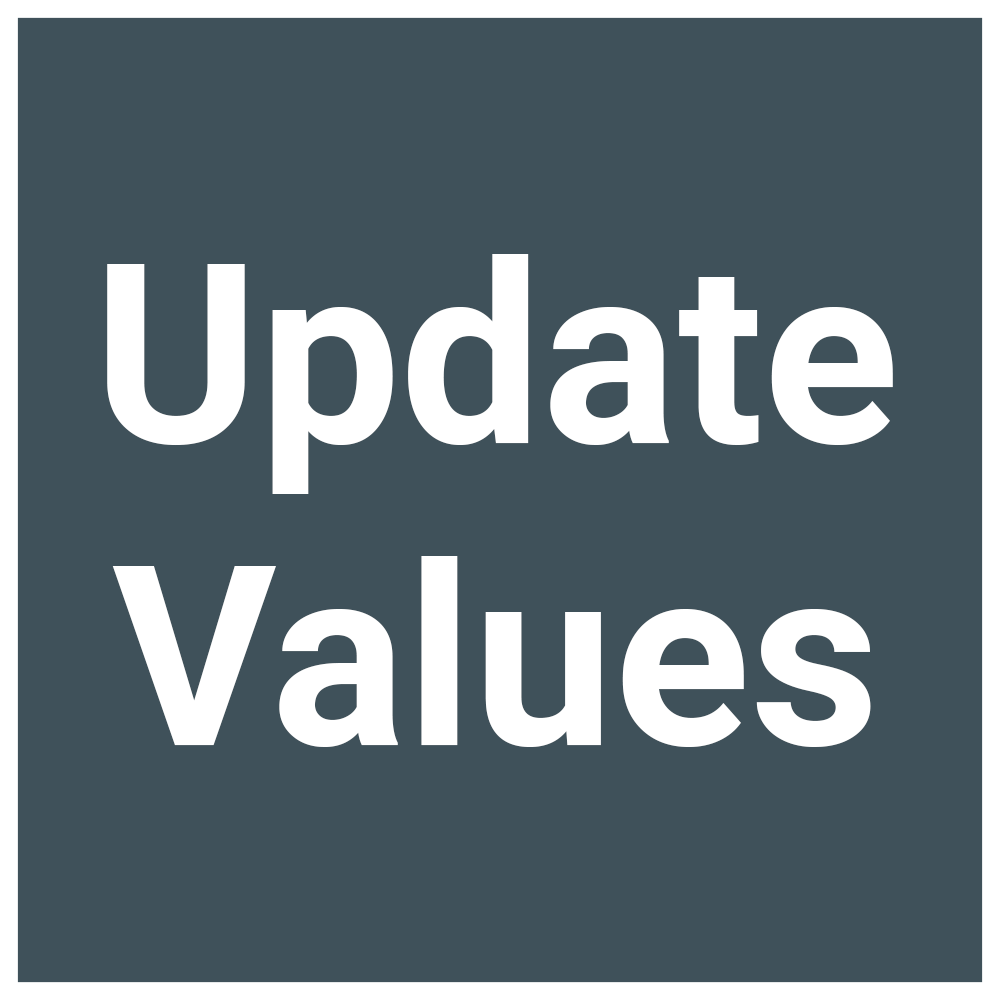
<style>
.page{position:relative;width:1000px;height:1000px;background:#3f515a}
.page>*{position:absolute;margin:0}
.t1{font:252px "Roboto-Bold";color:#ffffff}
</style>
<div class="page">
<p class="t1" style="left:107px;top:254px;width:786px;height:493px;text-align:center">Update<br>Values</p>
</div>
